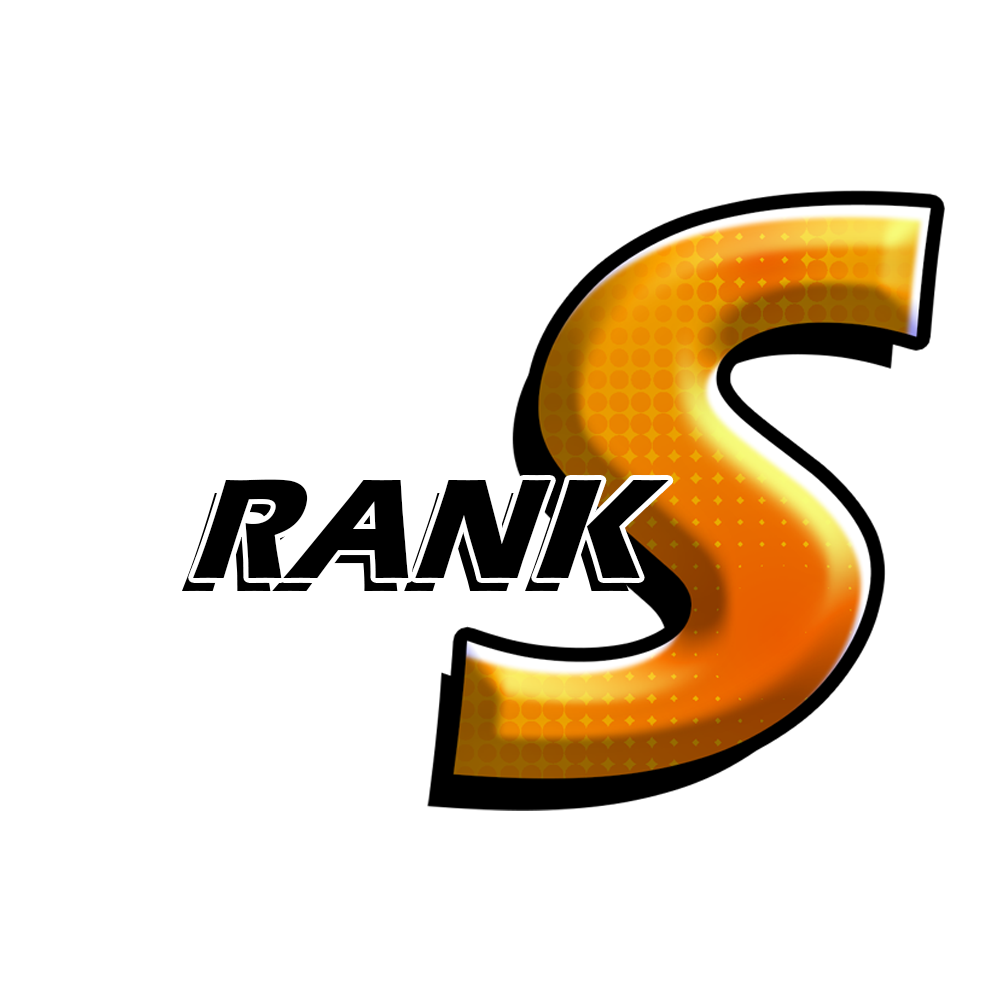
<style>
.page{position:relative;width:1000px;height:1000px;background:#ffffff}
.page>*{position:absolute;margin:0}
.t1{font:152.8px "ErasITC-Bold";color:#000000;scale:0.96 1}
</style>
<div class="page">
<p class="t1" style="left:193px;top:479px;width:476px;height:99px">RANK</p>
</div>
